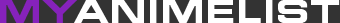
<style>
.page{position:relative;width:340px;height:23px;background:#333333}
.page>*{position:absolute;margin:0}
.t1{font:32px "Grammara-Normal";letter-spacing:0.1em;color:#ffffff}
.t2{font:32px "Grammara-Normal";color:#8622bb}
.t3{font:32px "Grammara-Normal";letter-spacing:0.075em;color:#8622bb}
.t4{font:32px "Grammara-Normal";letter-spacing:0.075em;color:#ffffff}
.t5{font:32px "Grammara-Normal";letter-spacing:0.01em;color:#ffffff}
</style>
<div class="page">
<p class="t1" style="left:0px;top:0px;width:340px;height:23px"><span class="t2">M</span><span class="t3">Y</span><span class="t4">A</span>NIMELI<span class="t5">S</span>T</p>
</div>
